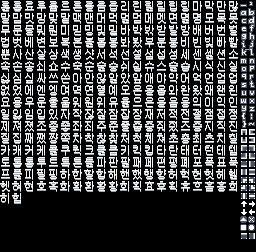
<style>
.page{position:relative;width:256px;height:252px;background:#000000}
.page>*{position:absolute;margin:0}
.t1{font:11px/12px "GulimChe";letter-spacing:0.093em;color:#f8f8f8}
</style>
<div class="page">
<p class="t1" style="left:0px;top:1px;width:238px;height:202px">롤롭료루륨르른를름릅리린릴림립링마막만많<br>말맘맛망맞맡맥맨머먹멀멈메멧면멸명모목못<br>무문물뭐뭔미믿밍및밑바박밖받발방배버번벌<br>법벗베변보복본볼봅봉봐봤부분붕비빈빛빠빨<br>뿐사산살상색생샷서석선설섬섭성세센셀션소<br>속손송쇠쇼수숙순술숭쉬쉽슈스슬습시식신실<br>싫심싶싸쓰쓴아안않알았앞애야약어억언엄업<br>없었에엔엥여역연열예오온올옵와완왔왜왠왼<br>요용우운울움워원위유율으은을음응의이익인<br>일잃임입있자작잖잘잠잡장재저적전절점접정<br>제져졌조종좋좌죄주준줄줍중줘줬즈증지직진<br>질집째쨌쨩쪽차착찮찾처척체쳐초총최츠치칠<br>카캐커케콜쿠퀵크클큼키킥킵타탄태터턴테템<br>토톱통투트특튼틀파판팔패페편평폐포폭표푹<br>프플피필핑하한할합해핸했행향허헉헌헛헤헬<br>헷혀현호혹화확환활황회획효후휙휴흐흠흥희<br>히힘</p>
</div>
